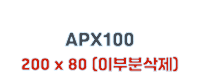
<style>
.page{position:relative;width:200px;height:80px;background:#ffffff}
.page>*{position:absolute;margin:0}
.t1{font:17px "Jalnan"}
.t2{font:15px "Jalnan"}
</style>
<div class="page">
<p class="t1" style="left:64px;top:31px;width:71px;height:17px">APX100</p>
<p class="t2" style="left:20px;top:55px;width:160px;height:18px">200 x 80 (이부분삭제)</p>
</div>
